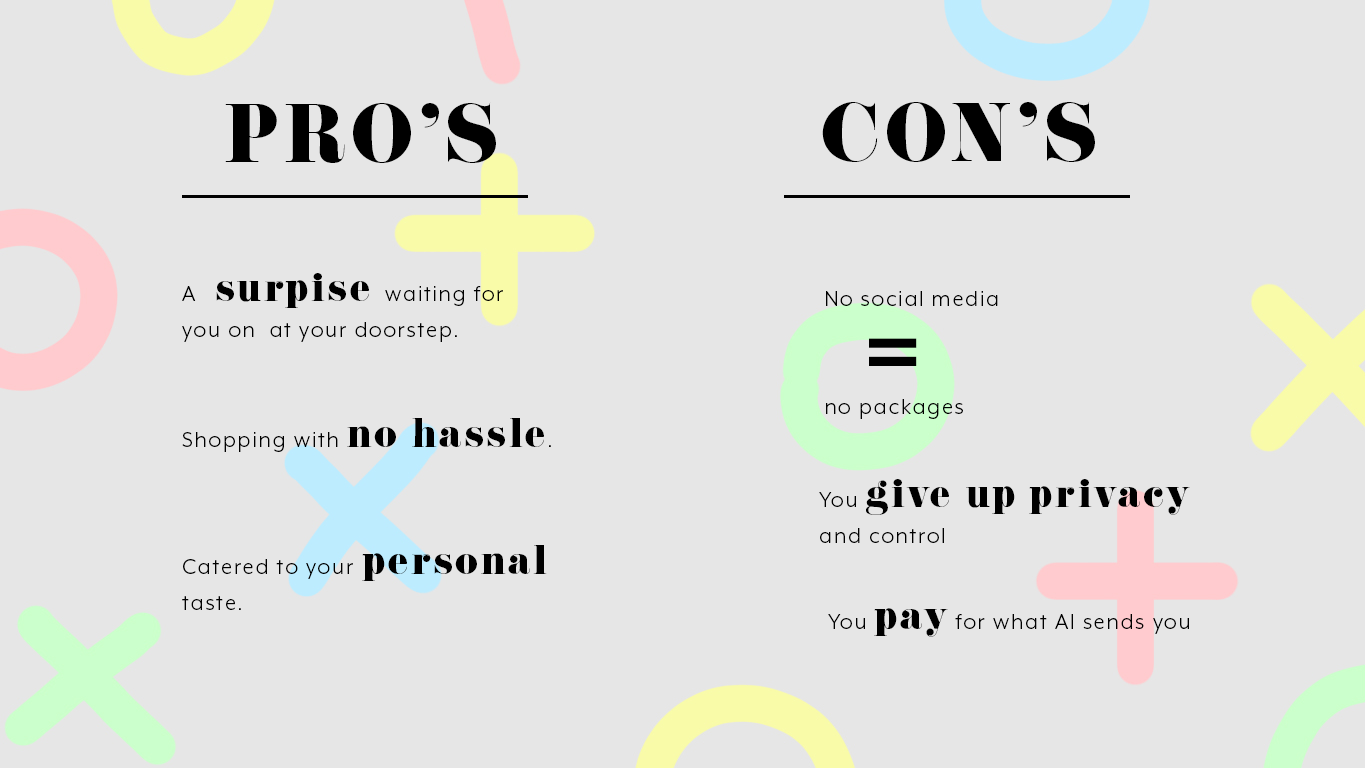
<style>
.page{position:relative;width:1366px;height:768px;background:#e6e6e6}
.page>*{position:absolute;margin:0}
.t1{font:72px "EloquentJFPro-Regular";letter-spacing:0.075em;color:#000000}
.t2{font:24px/36px "MrEavesXLModOT-Book";letter-spacing:0.075em;color:#000000}
.t3{font:36px/36px "EloquentJFPro-Regular";letter-spacing:0.075em;color:#000000}
.t4{font:200px "EloquentJFPro-Regular";letter-spacing:0.075em;color:#000000}
.t5{font:24px "MrEavesXLModOT-Book";letter-spacing:0.075em;color:#000000}
.t6{font:36px "EloquentJFPro-Regular";letter-spacing:0.075em;color:#000000}
</style>
<div class="page">
<p class="t1" style="left:225px;top:102px;width:271px;height:61px">PRO’S</p>
<p class="t1" style="left:822px;top:101px;width:273px;height:61px">CON’S</p>
<p class="t2" style="left:182px;top:273px;width:321px;height:69px">A <span class="t3">surpise</span>  waiting for you on  at your doorstep.</p>
<p class="t2" style="left:826px;top:291px;width:172px;height:128px">No social media   <br><br><br>no packages</p>
<p class="t4" style="left:869px;top:338px;width:48px;height:28px">=</p>
<p class="t5" style="left:182px;top:418px;width:369px;height:34px">Shopping with <span class="t6">no hassle</span>.</p>
<p class="t3" style="left:819px;top:479px;width:371px;height:64px"><span class="t2">You </span>give up privacy<br><span class="t2">and control</span></p>
<p class="t2" style="left:182px;top:545px;width:365px;height:65px">Catered to your <span class="t3">personal</span> taste.</p>
<p class="t5" style="left:828px;top:608px;width:361px;height:29px">You <span class="t6">pay</span> for what Al sends you</p>
</div>
